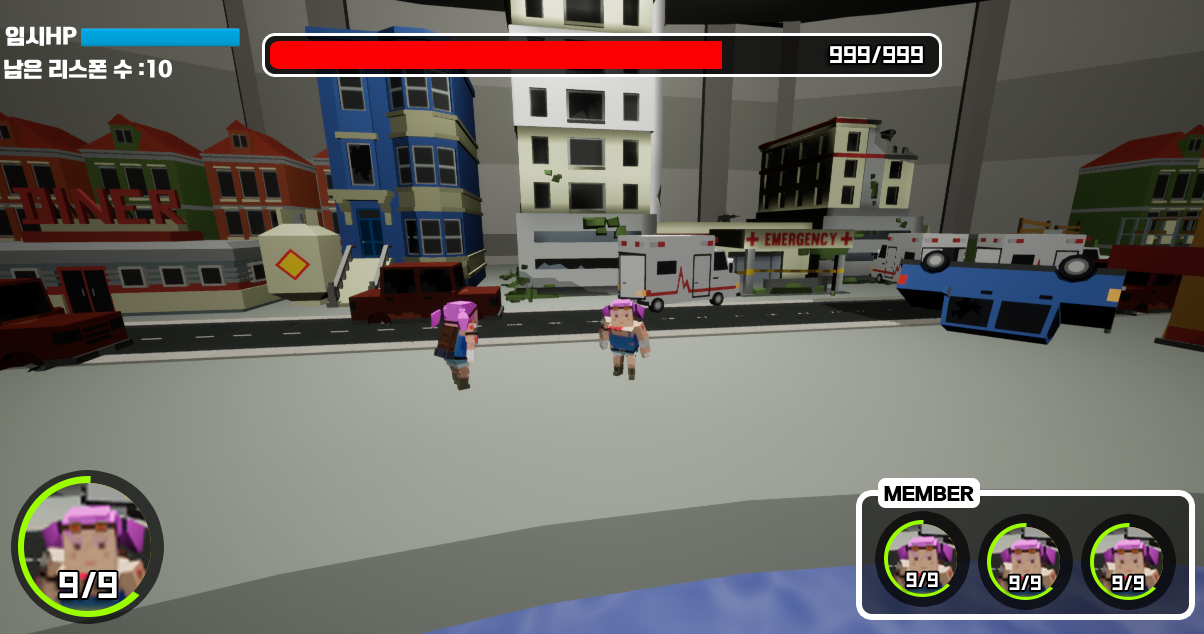
<style>
.page{position:relative;width:1204px;height:634px}
.page>*{position:absolute;margin:0}
.t1{font:24px "SquareFont";color:#ffffff}
.t2{font:18.5px "DXBangtango-KSCpc-EUC-H";color:#000000}
.t3{font:37.1px "SquareFont";color:#ffffff}
.t4{font:20.2px "SquareFont";color:#ffffff}
</style>
<div class="page">
<p class="t1" style="left:830px;top:46px;width:93px;height:17px">999/999</p>
<p class="t2" style="left:884px;top:486px;width:90px;height:15px">MEMBER</p>
<p class="t3" style="left:59px;top:572px;width:58px;height:26px">9/9</p>
<p class="t4" style="left:906px;top:572px;width:32px;height:15px">9/9</p>
<p class="t4" style="left:1009px;top:575px;width:32px;height:15px">9/9</p>
<p class="t4" style="left:1112px;top:575px;width:32px;height:15px">9/9</p>
</div>
